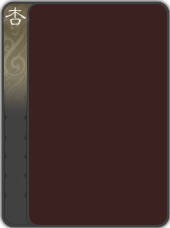
<style>
.page{position:relative;width:170px;height:228px;background:#3b2221}
.page>*{position:absolute;margin:0}
.t1{font:24px "FZLBJW--GB1-0";letter-spacing:0.075em;color:#eae6dc}
</style>
<div class="page">
<p class="t1" style="left:5px;top:7px;width:21px;height:18px">杏</p>
</div>
